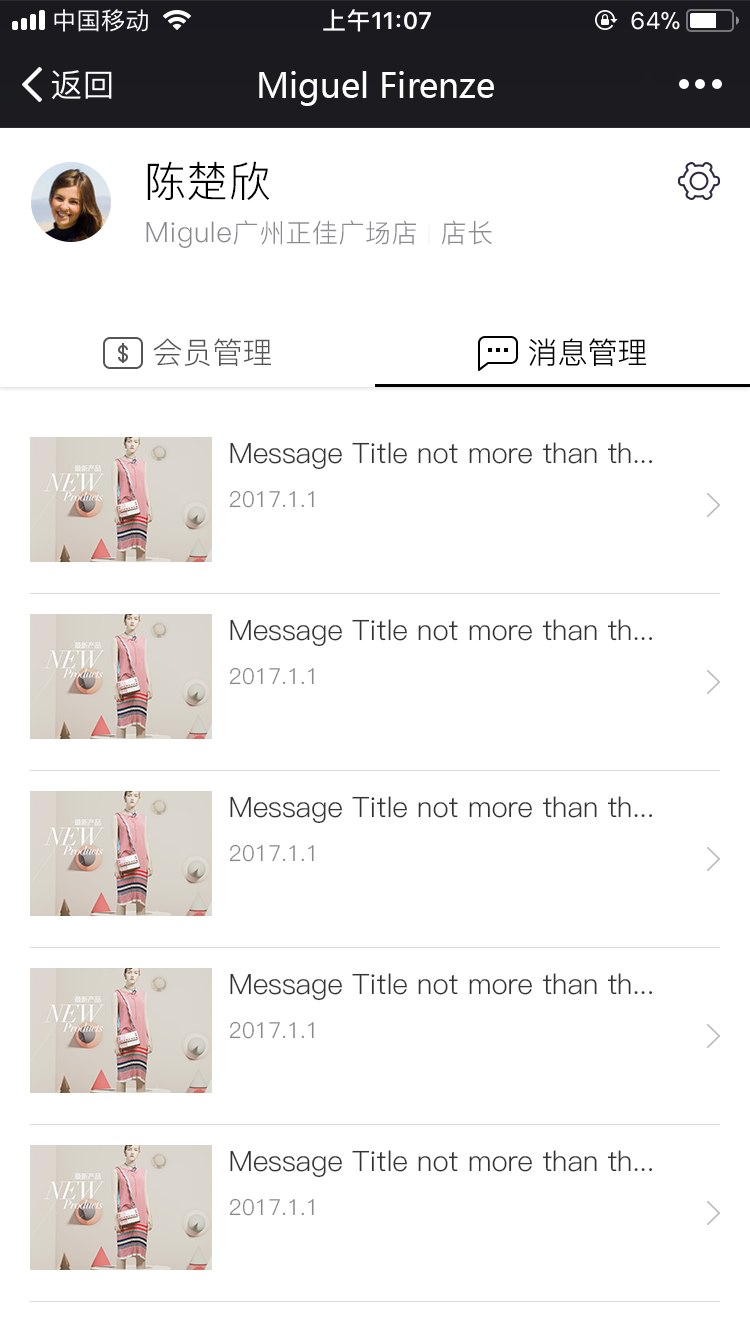
<style>
.page{position:relative;width:750px;height:1334px;background:#ffffff}
.page>*{position:absolute;margin:0}
.t1{font:34px "MicrosoftYaHei";color:#ffffff}
.t2{font:42px "PingFang-SC-Regular";letter-spacing:0.02em;color:#000000}
.t3{font:26px "PingFang-SC-Regular";letter-spacing:0.02em;color:#8a8a8f}
.t4{font:28px "PingFang-SC-Regular";letter-spacing:0.02em;color:#8a8a8f}
.t5{font:20px "PingFang-SC-Regular";letter-spacing:0.02em;color:#eeeeee}
.t6{font:30px "PingFang-SC-Regular";color:#555555}
.t7{font:30px "PingFang-SC-Regular";color:#000000}
.t8{font:28px "PingFang-SC-Regular";color:#333333}
.t9{font:22px "PingFang-SC-Regular";color:#888888}
</style>
<div class="page">
<p class="t1" style="left:259px;top:71px;width:235px;height:35px">Miguel Firenze</p>
<p class="t2" style="left:147px;top:161px;width:123px;height:40px">陈楚欣</p>
<p class="t3" style="left:146px;top:220px;width:346px;height:28px"><span class="t4">Migule</span>广州正佳广场店 <span class="t5">|</span> 店长</p>
<p class="t6" style="left:153px;top:338px;width:118px;height:28px">会员管理</p>
<p class="t7" style="left:529px;top:338px;width:117px;height:28px">消息管理</p>
<p class="t8" style="left:229px;top:442px;width:424px;height:66px">Message Title not more than th...<br><span class="t9">2017.1.1</span></p>
<p class="t8" style="left:229px;top:619px;width:424px;height:66px">Message Title not more than th...<br><span class="t9">2017.1.1</span></p>
<p class="t8" style="left:229px;top:796px;width:424px;height:66px">Message Title not more than th...<br><span class="t9">2017.1.1</span></p>
<p class="t8" style="left:229px;top:973px;width:424px;height:66px">Message Title not more than th...<br><span class="t9">2017.1.1</span></p>
<p class="t8" style="left:229px;top:1150px;width:424px;height:66px">Message Title not more than th...<br><span class="t9">2017.1.1</span></p>
</div>
